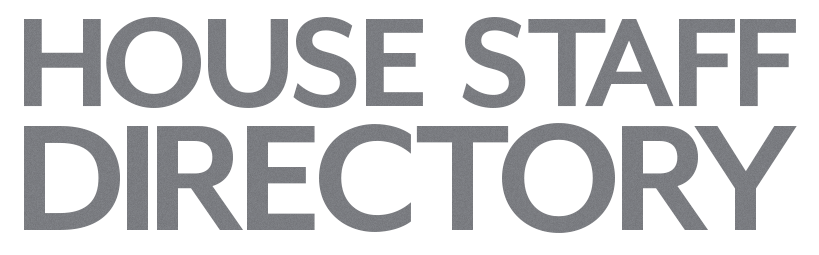
<style>
.page{position:relative;width:819px;height:255px;background:#ffffff}
.page>*{position:absolute;margin:0}
.t1{font:145.7px "MrEavesModAltB";color:#84868b}
.t2{font:172.9px "MrEavesModAltB";color:#84868b}
</style>
<div class="page">
<p class="t1" style="left:24px;top:17px;width:772px;height:91px">HOUSE STAFF</p>
<p class="t2" style="left:24px;top:123px;width:773px;height:110px">DIRECTORY</p>
</div>
